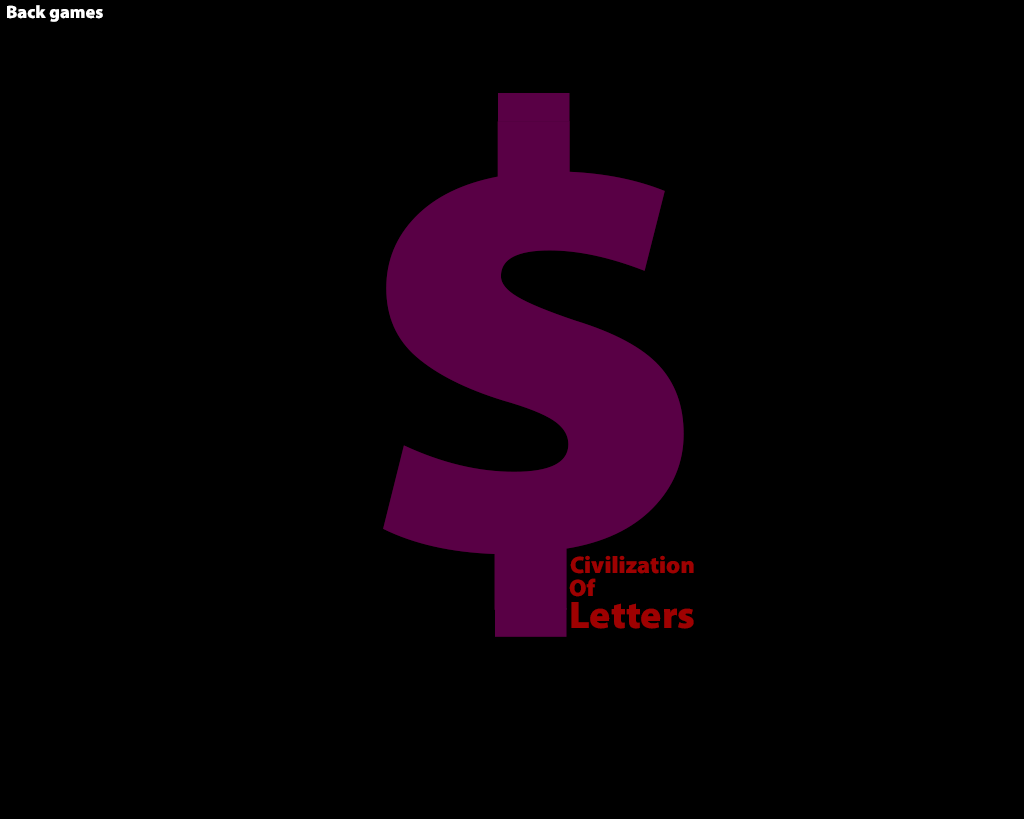
<style>
.page{position:relative;width:1024px;height:819px;background:#000000}
.page>*{position:absolute;margin:0}
.t1{font:18px "MyriadPro-Black";color:#ffffff}
.t2{font:600px "MyriadPro-Black";color:#590045;scale:1.05 1}
.t3{font:24px "MyriadPro-Black";color:#9e0101}
.t4{font:38.6px "MyriadPro-Black";color:#9e0101}
</style>
<div class="page">
<p class="t1" style="left:7px;top:5px;width:96px;height:17px">Back games</p>
<p class="t2" style="left:383px;top:121px;width:301px;height:489px">$</p>
<p class="t3" style="left:570px;top:555px;width:124px;height:19px">Civilization</p>
<p class="t3" style="left:569px;top:578px;width:27px;height:19px">Of</p>
<p class="t4" style="left:571px;top:602px;width:123px;height:27px">Letters</p>
</div>
